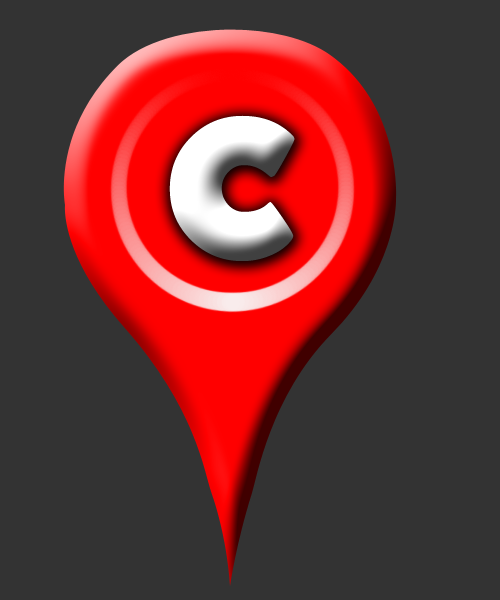
<style>
.page{position:relative;width:500px;height:600px;background:#333333}
.page>*{position:absolute;margin:0}
.t1{font:200px "BerlinSansFB-Bold"}
</style>
<div class="page">
<p class="t1" style="left:169px;top:115px;width:126px;height:146px">C</p>
</div>
